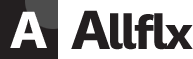
<style>
.page{position:relative;width:193px;height:59px;background:#ffffff}
.page>*{position:absolute;margin:0}
.t1{font:55px "WorkSans-Bold";letter-spacing:-0.05em;color:#ffffff}
.t2{font:48px "WorkSans-Bold";letter-spacing:-0.05em;color:#231f20}
.t3{font:58px "WorkSans-Bold";letter-spacing:-0.05em;color:#231f20}
</style>
<div class="page">
<p class="t1" style="left:10px;top:11px;width:37px;height:37px">A</p>
<p class="t2" style="left:71px;top:10px;width:122px;height:40px"><span class="t3">A</span>llflx</p>
</div>
